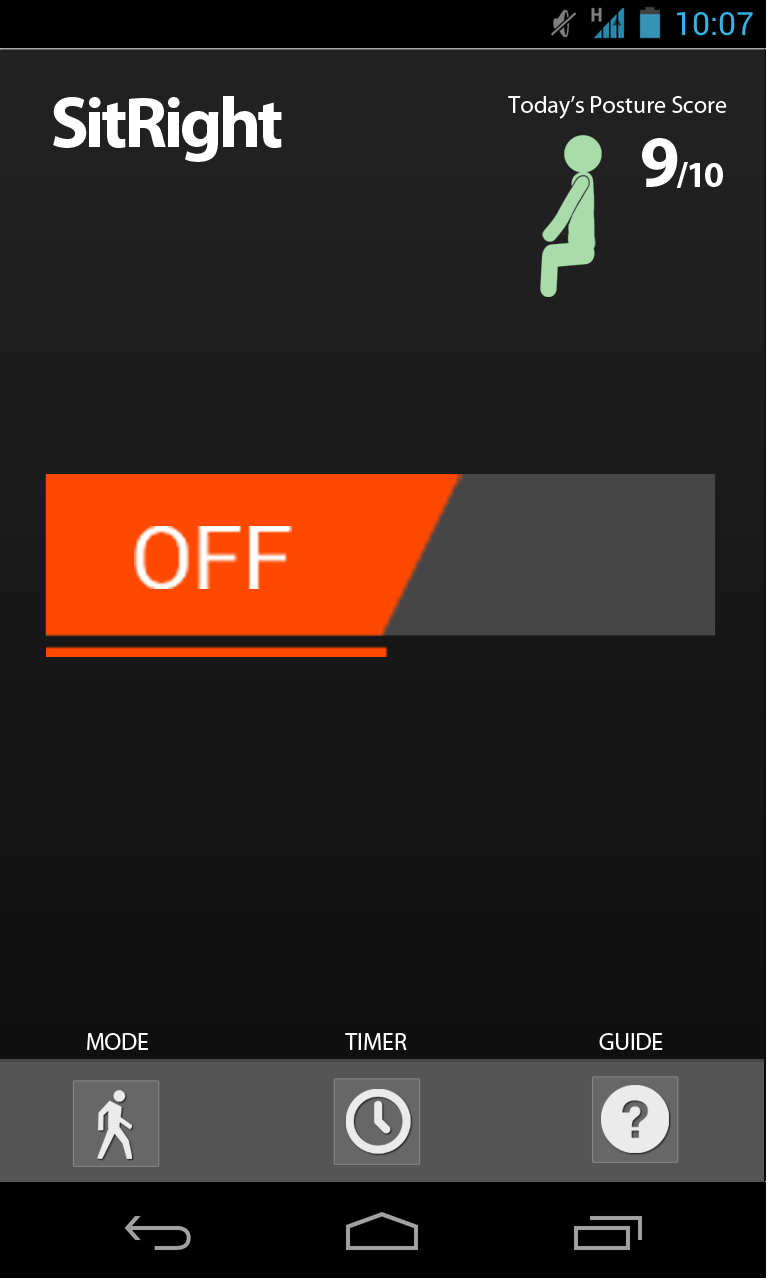
<style>
.page{position:relative;width:768px;height:1280px}
.page>*{position:absolute;margin:0}
.t1{font:72px "MyriadPro-Bold";letter-spacing:-0.05em;color:#ffffff}
.t2{font:24px "MyriadPro-Regular";color:#ffffff}
.t3{font:36px "MyriadPro-Bold";letter-spacing:-0.05em;color:#ffffff}
.t4{font:90.6px "Roboto-Regular";color:#ffffff}
</style>
<div class="page">
<p class="t1" style="left:53px;top:96px;width:229px;height:66px">SitRight</p>
<p class="t2" style="left:508px;top:95px;width:219px;height:24px">Today’s Posture Score</p>
<p class="t1" style="left:642px;top:138px;width:36px;height:49px">9</p>
<p class="t3" style="left:676px;top:162px;width:47px;height:26px">/10</p>
<p class="t4" style="left:134px;top:526px;width:158px;height:63px">OFF</p>
<p class="t2" style="left:87px;top:1033px;width:61px;height:17px">MODE</p>
<p class="t2" style="left:345px;top:1033px;width:62px;height:17px">TIMER</p>
<p class="t2" style="left:599px;top:1033px;width:64px;height:17px">GUIDE</p>
</div>
